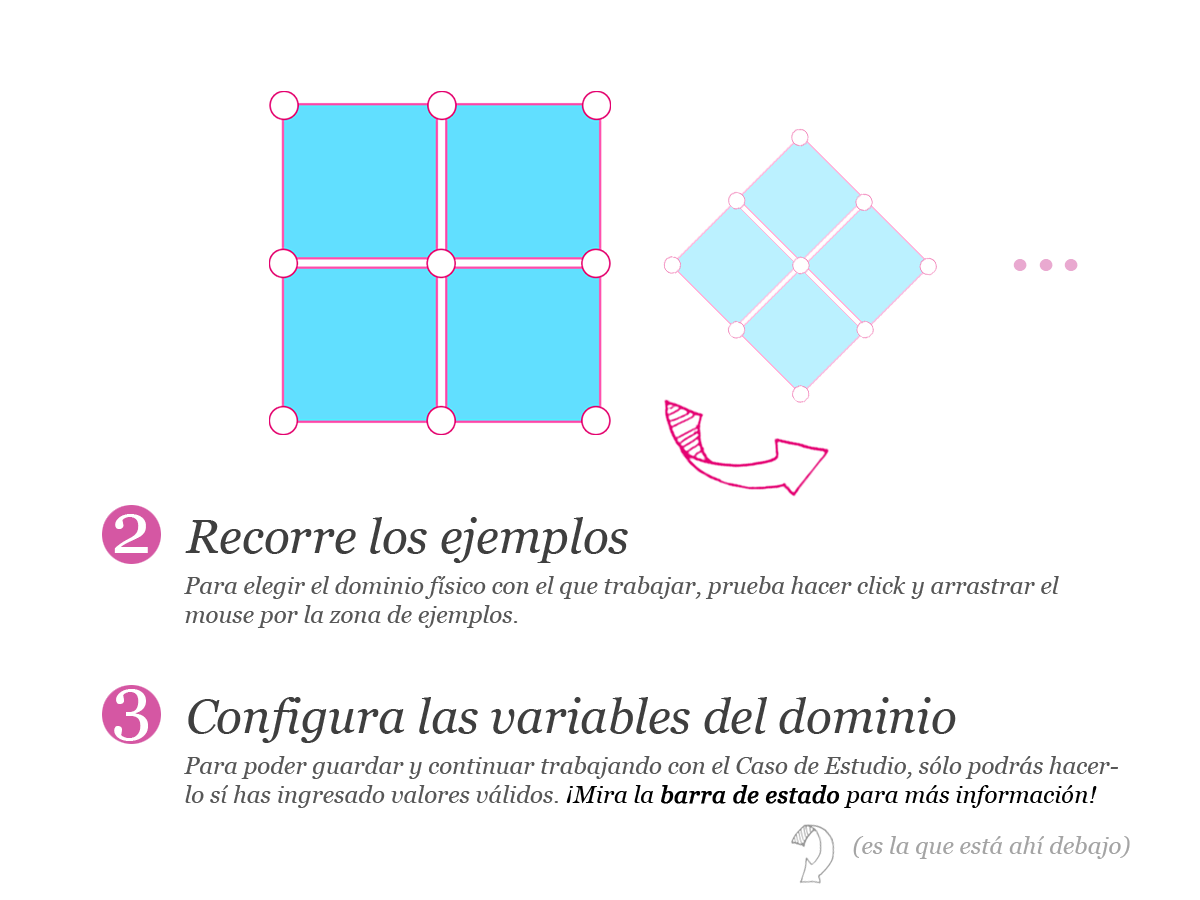
<style>
.page{position:relative;width:1200px;height:900px;background:#ffffff}
.page>*{position:absolute;margin:0}
.t1{font:94px "Georgia-Italic";color:#e9a9d0}
.t2{font:72px "Georgia";color:#ffffff}
.t3{font:48px "Georgia-Italic";color:#3f3f3f}
.t4{font:24px "Georgia-Italic";color:#575757}
.t5{font:24px "Georgia-Italic";color:#000000}
.t6{font:24px "Georgia-Italic";color:#000000;font-weight:bold}
.t7{font:24px "Georgia-Italic";color:#a4a4a4}
</style>
<div class="page">
<p class="t1" style="left:1013px;top:259px;width:65px;height:12px">...</p>
<p class="t2" style="left:114px;top:514px;width:34px;height:39px">2</p>
<p class="t3" style="left:185px;top:517px;width:443px;height:46px">Recorre los ejemplos</p>
<p class="t4" style="left:184px;top:576px;width:875px;height:52px">Para elegir el dominio físico con el que trabajar, prueba hacer click y arrastrar el mouse por la zona de ejemplos.</p>
<p class="t2" style="left:114px;top:689px;width:34px;height:52px">3</p>
<p class="t3" style="left:188px;top:697px;width:768px;height:46px">Configura las variables del dominio</p>
<p class="t4" style="left:184px;top:756px;width:934px;height:52px">Para poder guardar y continuar trabajando con el Caso de Estudio, sólo podrás hacerlo sí has ingresado valores válidos. <span class="t5">¡Mira la </span><span class="t6">barra de estado </span><span class="t5">para más información!</span></p>
<p class="t7" style="left:853px;top:836px;width:277px;height:23px">(es la que está ahí debajo)</p>
</div>
